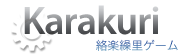
<style>
.page{position:relative;width:190px;height:55px;background:#ffffff}
.page>*{position:absolute;margin:0}
.t1{font:40px "MyriadPro-Semibold";letter-spacing:-0.025em}
.t2{font:12px "HiraKakuPro-W3"}
</style>
<div class="page">
<p class="t1" style="left:24px;top:5px;width:135px;height:30px">Karakuri</p>
<p class="t2" style="left:96px;top:39px;width:82px;height:12px">絡楽繰里ゲーム</p>
</div>
